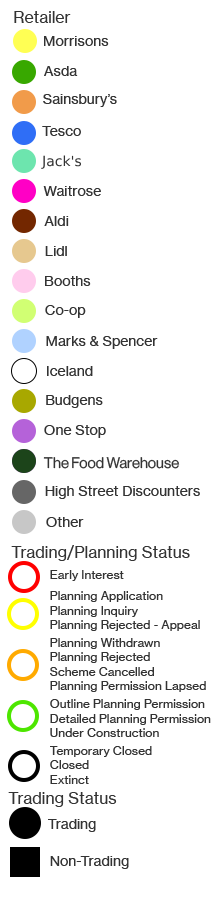
<style>
.page{position:relative;width:212px;height:900px;background:#ffffff}
.page>*{position:absolute;margin:0}
.t1{font:16px "NHaasGroteskTXPro-Rg";color:#333333}
.t2{font:14px "NHaasGroteskTXPro-Rg";color:#333333}
.t3{font:15px "NeueHaasDisplay-Roman";color:#333333}
.t4{font:12px "NHaasGroteskTXPro-Rg";color:#333333}
</style>
<div class="page">
<p class="t1" style="left:14px;top:11px;width:57px;height:12px">Retailer</p>
<p class="t2" style="left:44px;top:36px;width:65px;height:10px">Morrisons</p>
<p class="t2" style="left:44px;top:66px;width:34px;height:10px">Asda</p>
<p class="t2" style="left:43px;top:94px;width:74px;height:13px">Sainsbury’s</p>
<p class="t2" style="left:42px;top:126px;width:39px;height:10px">Tesco</p>
<p class="t2" style="left:41px;top:155px;width:40px;height:14px">Jack's</p>
<p class="t2" style="left:43px;top:186px;width:58px;height:10px">Waitrose</p>
<p class="t2" style="left:44px;top:216px;width:25px;height:10px">Aldi</p>
<p class="t2" style="left:45px;top:246px;width:22px;height:10px">Lidl</p>
<p class="t2" style="left:45px;top:276px;width:46px;height:10px">Booths</p>
<p class="t2" style="left:45px;top:305px;width:41px;height:13px">Co-op</p>
<p class="t2" style="left:46px;top:336px;width:112px;height:13px">Marks &amp; Spencer</p>
<p class="t2" style="left:47px;top:366px;width:46px;height:10px">Iceland</p>
<p class="t2" style="left:46px;top:395px;width:57px;height:13px">Budgens</p>
<p class="t2" style="left:44px;top:425px;width:62px;height:13px">One Stop</p>
<p class="t3" style="left:43px;top:457px;width:137px;height:12px">The Food Warehouse</p>
<p class="t2" style="left:45px;top:486px;width:155px;height:13px">High Street Discounters</p>
<p class="t2" style="left:46px;top:517px;width:38px;height:10px">Other</p>
<p class="t1" style="left:11px;top:545px;width:179px;height:16px">Trading/Planning Status</p>
<p class="t4" style="left:50px;top:570px;width:161px;height:214px">Early Interest<br><br><br>Planning Application<br>Planning Inquiry<br>Planning Rejected - Appeal<br><br>Planning Withdrawn<br>Planning Rejected<br>Scheme Cancelled<br>Planning Permission Lapsed<br><br>Outline Planning Permission<br>Detailed Planning Permission<br>Under Construction<br><br>Temporary Closed<br>Closed<br>Extinct</p>
<p class="t1" style="left:8px;top:792px;width:109px;height:15px">Trading Status</p>
<p class="t2" style="left:48px;top:819px;width:48px;height:13px">Trading</p>
<p class="t2" style="left:50px;top:856px;width:79px;height:13px">Non-Trading</p>
</div>
